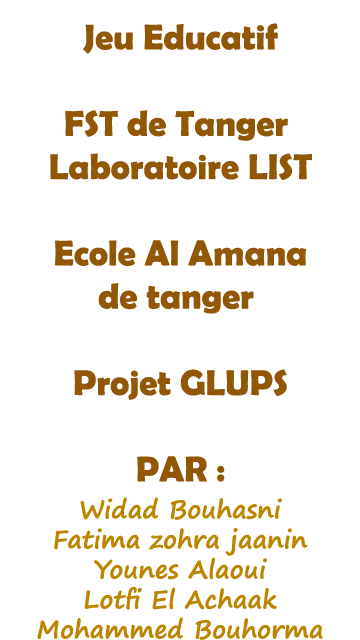
<style>
.page{position:relative;width:360px;height:640px;background:#ffffff}
.page>*{position:absolute;margin:0}
.t1{font:36px "BerlinSansFBDemi-Bold";color:#915705}
.t2{font:25px "SegoePrint-Bold";color:#bc8500}
</style>
<div class="page">
<p class="t1" style="left:50px;top:23px;width:263px;height:459px;text-align:center">Jeu Educatif<br><br> FST de Tanger<br>Laboratoire LIST<br><br>Ecole Al Amana<br> de tanger<br><br>Projet GLUPS<br><br>: PAR</p>
<p class="t2" style="left:37px;top:497px;width:286px;height:143px;text-align:center">Widad Bouhasni<br>Fatima zohra jaanin<br>Younes Alaoui<br>Lotfi El Achaak<br>Mohammed Bouhorma</p>
</div>
